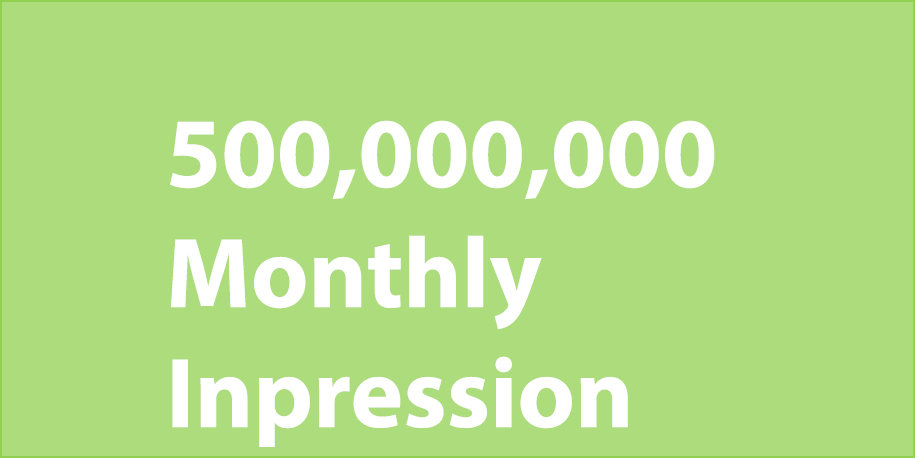
<style>
.page{position:relative;width:915px;height:458px;background:#addc7c}
.page>*{position:absolute;margin:0}
.t1{font:100px "MyriadPro-Bold";color:#ffffff}
.t2{font:100px "MyriadPro-Bold";color:#e11c2e}
</style>
<div class="page">
<p class="t1" style="left:170px;top:120px;width:545px;height:327px"><span class="t2"><br></span>500,000,000<br>Monthly<br>Inpression</p>
</div>
